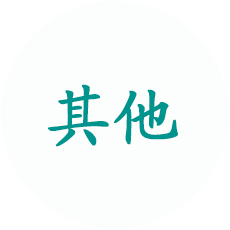
<style>
.page{position:relative;width:230px;height:230px;background:#fcfefd}
.page>*{position:absolute;margin:0}
.t1{font:66.3px "-G-k-a-i-0-0-m";color:#00948f;text-transform:uppercase;font-weight:bold}
</style>
<div class="page">
<p class="t1" style="left:48px;top:84px;width:130px;height:63px">其他</p>
</div>
